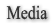
<style>
.page{position:relative;width:54px;height:25px;background:#ffffff}
.page>*{position:absolute;margin:0}
.t1{font:19px "TimesNewRomanPSMT";color:#333333;scale:0.84 1}
</style>
<div class="page">
<p class="t1" style="left:6px;top:5px;width:42px;height:15px">Media</p>
</div>
